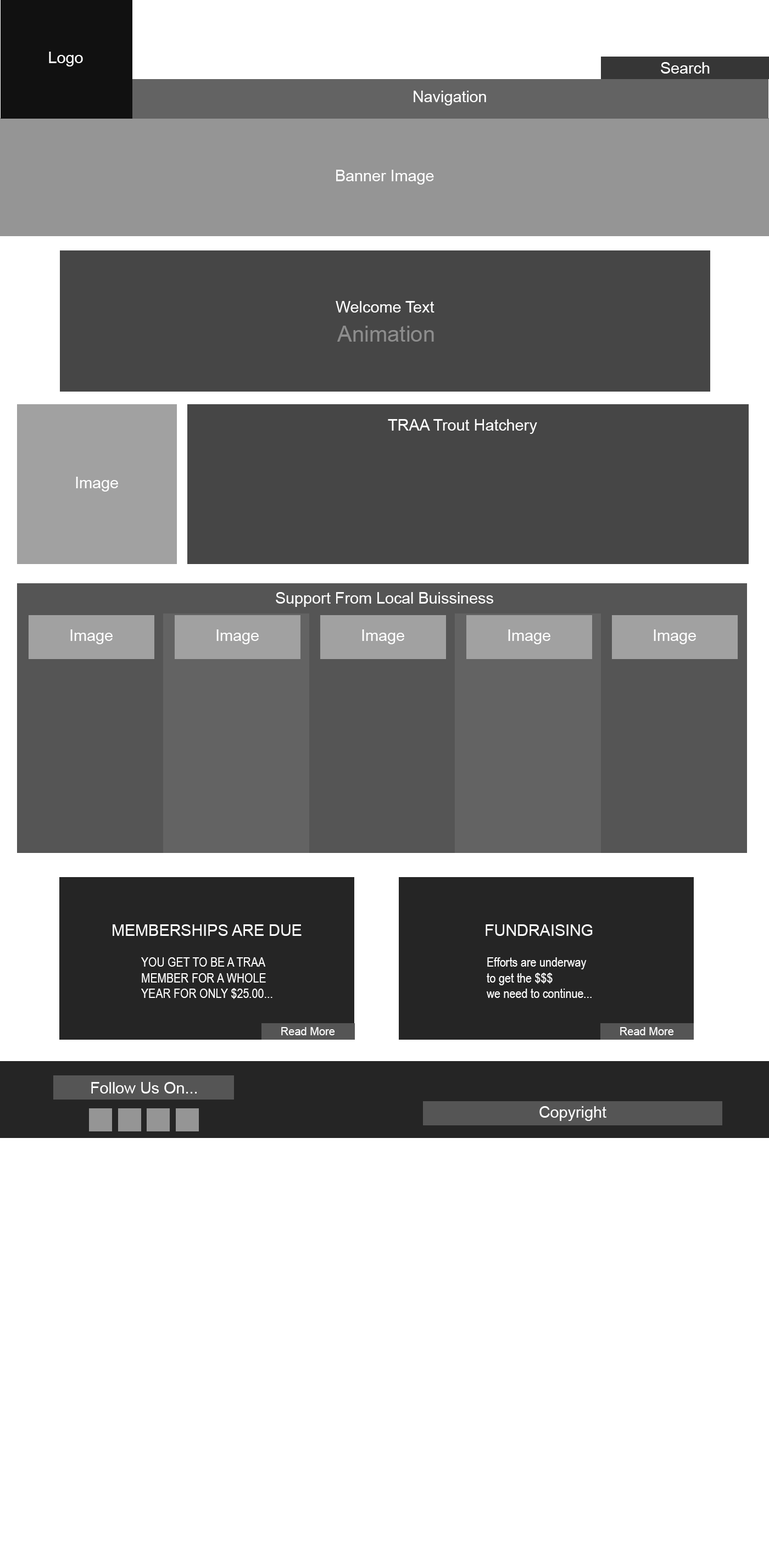
<style>
.page{position:relative;width:769px;height:1551px;background:#ffffff}
.page>*{position:absolute;margin:0}
.t1{font:15.8px "ArialMT";color:#ffffff}
.t2{font:22px "ArialMT";color:#8d8d8d}
.t3{font:13.2px "ArialNarrow";color:#ffffff}
.t4{font:11px "ArialMT";color:#ffffff}
</style>
<div class="page">
<p class="t1" style="left:49px;top:52px;width:34px;height:14px">Logo</p>
<p class="t1" style="left:661px;top:62px;width:49px;height:12px">Search</p>
<p class="t1" style="left:414px;top:91px;width:72px;height:14px">Navigation</p>
<p class="t1" style="left:336px;top:170px;width:98px;height:15px">Banner Image</p>
<p class="t1" style="left:336px;top:301px;width:98px;height:11px">Welcome Text</p>
<p class="t2" style="left:337px;top:326px;width:97px;height:16px">Animation</p>
<p class="t1" style="left:388px;top:419px;width:149px;height:15px">TRAA Trout Hatchery</p>
<p class="t1" style="left:76px;top:477px;width:42px;height:15px">Image</p>
<p class="t1" style="left:276px;top:592px;width:217px;height:15px">Support From Local Buissiness</p>
<p class="t1" style="left:70px;top:629px;width:43px;height:15px">Image</p>
<p class="t1" style="left:216px;top:629px;width:43px;height:15px">Image</p>
<p class="t1" style="left:362px;top:629px;width:42px;height:15px">Image</p>
<p class="t1" style="left:508px;top:629px;width:42px;height:15px">Image</p>
<p class="t1" style="left:654px;top:629px;width:42px;height:15px">Image</p>
<p class="t1" style="left:113px;top:924px;width:189px;height:12px">MEMBERSHIPS ARE DUE</p>
<p class="t1" style="left:485px;top:924px;width:108px;height:12px">FUNDRAISING</p>
<p class="t3" style="left:141px;top:957px;width:131px;height:42px">YOU GET TO BE A TRAA <br>MEMBER FOR A WHOLE <br>YEAR FOR ONLY $25.00...</p>
<p class="t3" style="left:487px;top:957px;width:104px;height:41px">Efforts are underway <br>to get the $$$ <br>we need to continue...</p>
<p class="t4" style="left:281px;top:1027px;width:54px;height:8px">Read More</p>
<p class="t4" style="left:620px;top:1027px;width:54px;height:8px">Read More</p>
<p class="t1" style="left:91px;top:1082px;width:106px;height:11px">Follow Us On...</p>
<p class="t1" style="left:539px;top:1106px;width:67px;height:15px">Copyright</p>
</div>
